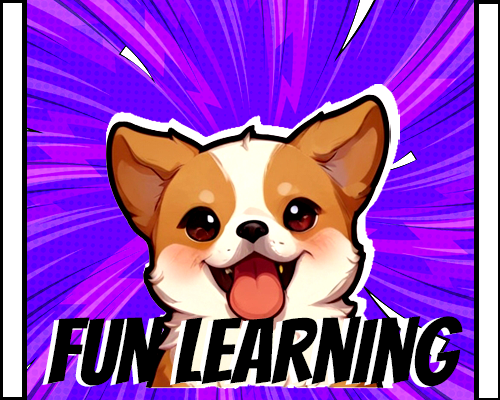
<style>
.page{position:relative;width:500px;height:400px}
.page>*{position:absolute;margin:0}
.t1{font:90.4px "Bangers-Regular";color:#000000}
</style>
<div class="page">
<p class="t1" style="left:47px;top:316px;width:416px;height:71px">fun learning</p>
</div>
